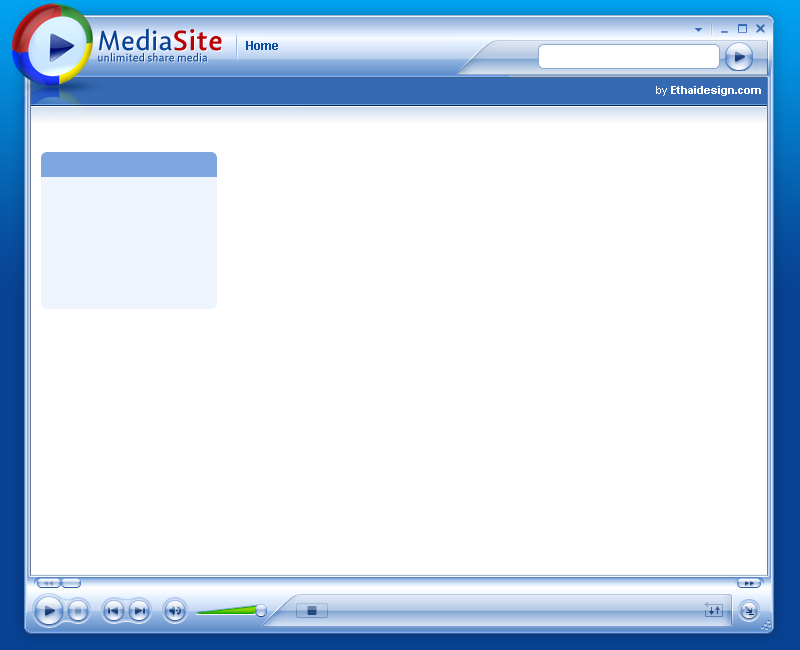
<style>
.page{position:relative;width:800px;height:650px;background:#ffffff}
.page>*{position:absolute;margin:0}
.t1{font:28.4px "LisboaSansLF";color:#084293}
.t2{font:28.4px "LisboaSansLF-Bold";color:#b70000}
.t3{font:12px "Arial-BoldMT";color:#0f4da3}
.t4{font:11.5px "LisboaSansOSF";color:#084293}
.t5{font:11px "Arial-BoldMT";color:#ffffff}
.t6{font:11px "ArialMT";color:#ffffff}
</style>
<div class="page">
<p class="t1" style="left:99px;top:28px;width:123px;height:23px">Media<span class="t2">Site</span></p>
<p class="t3" style="left:246px;top:41px;width:32px;height:9px">Home</p>
<p class="t4" style="left:98px;top:52px;width:110px;height:10px">unlimited share media</p>
<p class="t5" style="left:656px;top:86px;width:105px;height:10px"><span class="t6">by </span>Ethaidesign.com</p>
</div>
